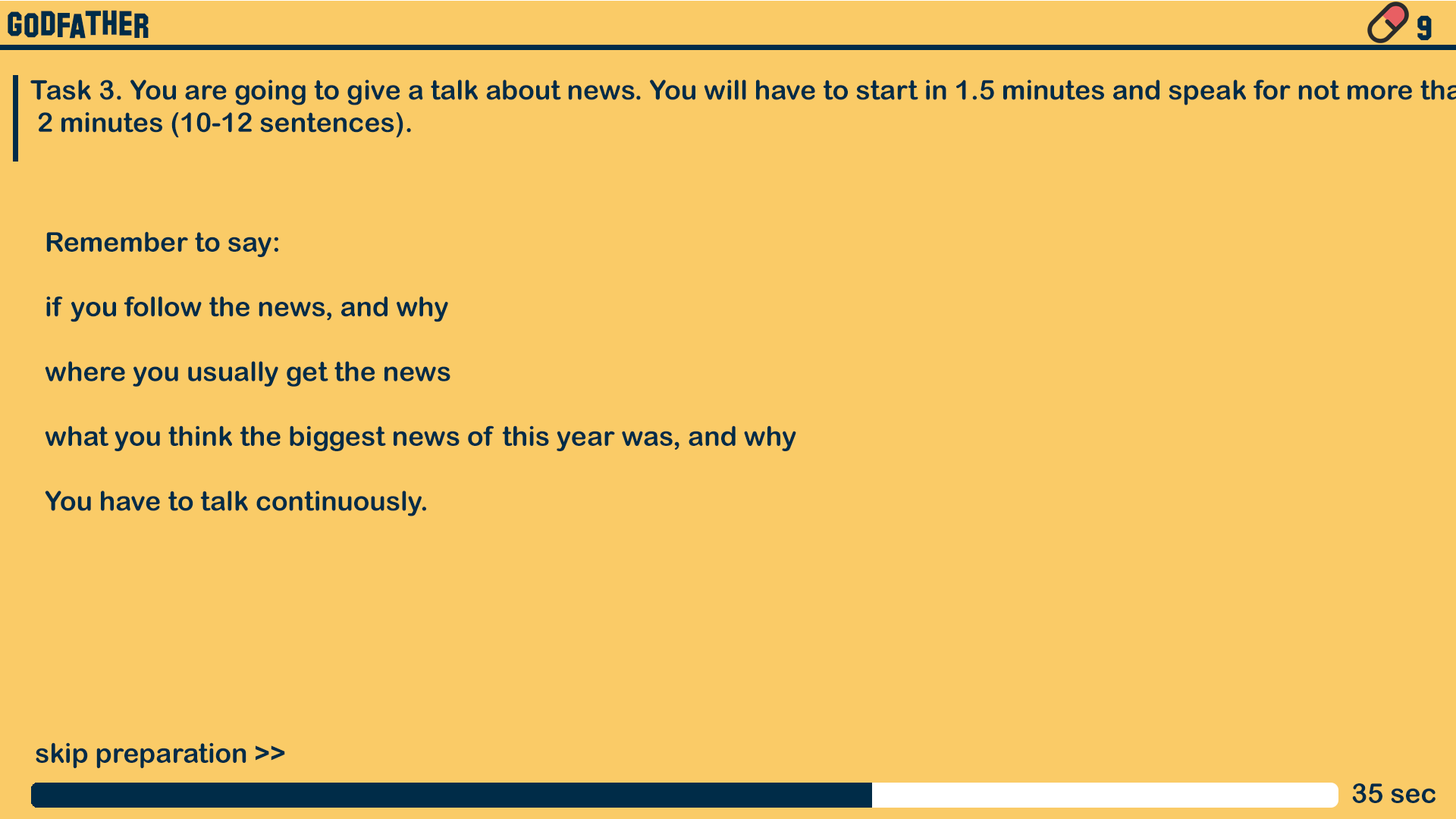
<style>
.page{position:relative;width:1456px;height:819px;background:#facb67}
.page>*{position:absolute;margin:0}
.t1{font:34.7px "HollywoodHills";color:#002c48}
.t2{font:27px "ArialRoundedMTBold";color:#002c48}
</style>
<div class="page">
<p class="t1" style="left:8px;top:10px;width:141px;height:29px">godfather</p>
<p class="t1" style="left:1417px;top:15px;width:15px;height:25px">9</p>
<p class="t2" style="left:45px;top:231px;width:751px;height:285px;text-align:justify">Remember to say:<br><br>if you follow the news, and why<br><br>where you usually get the news<br><br>what you think the biggest news of this year was, and why<br><br>You have to talk continuously.</p>
<p class="t2" style="left:36px;top:742px;width:249px;height:26px">skip preparation &gt;&gt;</p>
<p class="t2" style="left:1352px;top:783px;width:84px;height:20px">35 sec</p>
</div>
